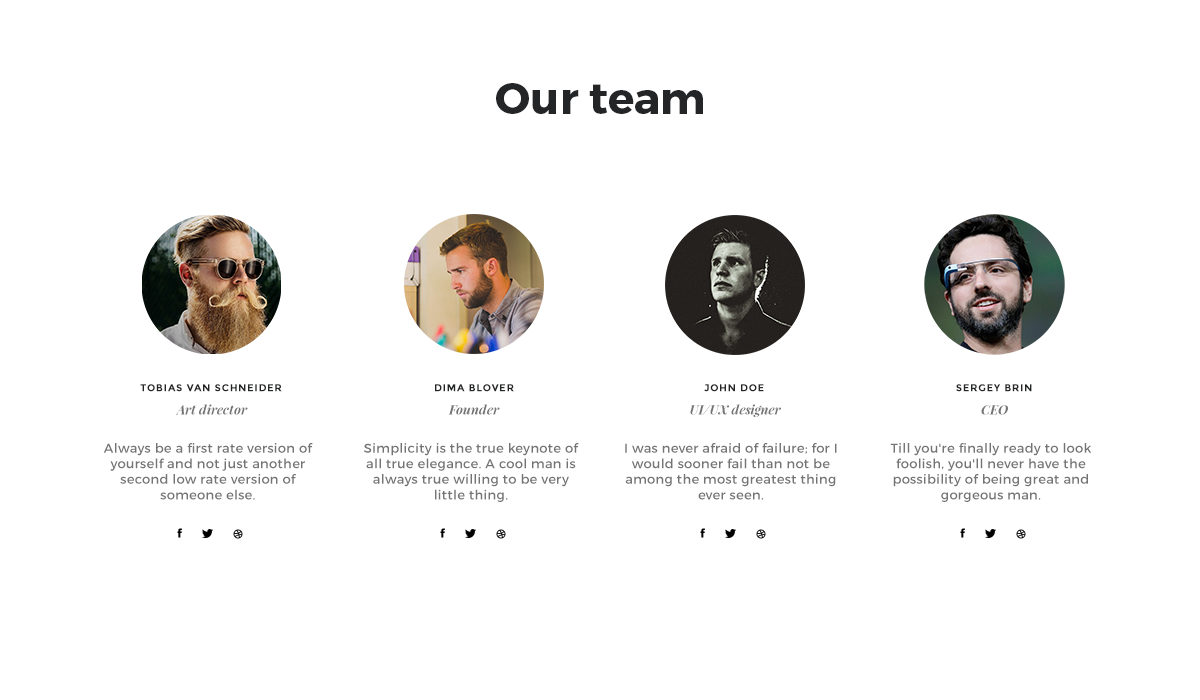
<style>
.page{position:relative;width:1200px;height:700px;background:#ffffff}
.page>*{position:absolute;margin:0}
.t1{font:44px "Montserrat-Bold";color:#242526}
.t2{font:10px "Montserrat-Bold";letter-spacing:0.08em;color:#242526;text-transform:uppercase}
.t3{font:13px "PlayfairDisplay-BoldItalic";color:#747474}
.t4{font:13px "Montserrat-Regular";letter-spacing:0.025em;color:#747474}
</style>
<div class="page">
<p class="t1" style="left:496px;top:83px;width:207px;height:31px">Our team</p>
<p class="t2" style="left:140px;top:384px;width:142px;height:8px">tobias van schneider</p>
<p class="t2" style="left:435px;top:384px;width:79px;height:8px">Dima Blover</p>
<p class="t2" style="left:704px;top:384px;width:60px;height:8px">John Doe</p>
<p class="t2" style="left:956px;top:384px;width:76px;height:8px">Sergey Brin</p>
<p class="t3" style="left:175px;top:404px;width:73px;height:11px">Art director</p>
<p class="t3" style="left:448px;top:404px;width:52px;height:11px">Founder</p>
<p class="t3" style="left:690px;top:404px;width:91px;height:13px">UI/UX designer</p>
<p class="t3" style="left:981px;top:405px;width:27px;height:10px">CEO</p>
<p class="t4" style="left:103px;top:443px;width:210px;height:57px;text-align:center">Always be a first rate version of yourself and not just another second low rate version of someone else.</p>
<p class="t4" style="left:364px;top:443px;width:215px;height:59px;text-align:center">Simplicity is the true keynote of all true elegance. A cool man is always true willing to be very little thing.</p>
<p class="t4" style="left:625px;top:443px;width:212px;height:57px;text-align:center">I was never afraid of failure; for I would sooner fail than not be among the most greatest thing ever seen.</p>
<p class="t4" style="left:890px;top:443px;width:202px;height:59px;text-align:center">Till you're finally ready to look foolish, you'll never have the possibility of being great and gorgeous man.</p>
</div>
